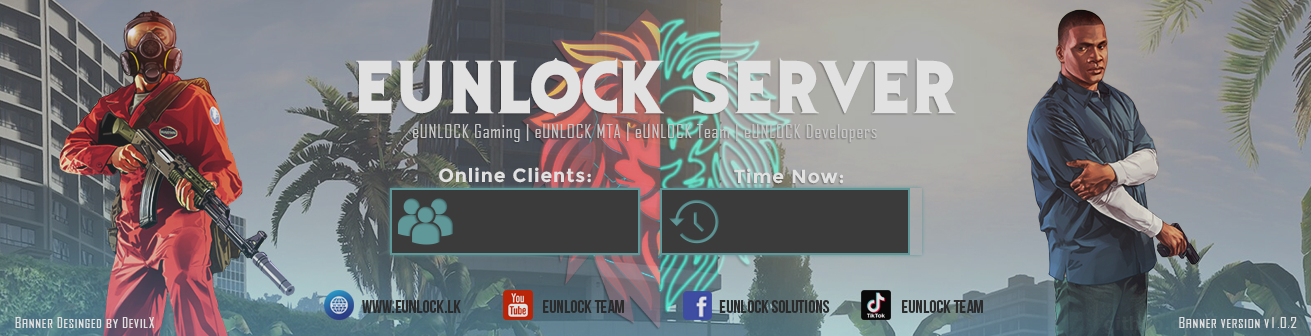
<style>
.page{position:relative;width:1311px;height:336px}
.page>*{position:absolute;margin:0}
.t1{font:62px "EvilDead";letter-spacing:0.05em;color:#e1e1e1}
.t2{font:18px "AgencyFB-Reg";letter-spacing:0.05em;color:#c7c7c7}
.t3{font:19px "Montserrat-Bold";letter-spacing:0.05em;color:#e1e1e1}
.t4{font:18px "BebasNeue";color:#29292a;text-transform:uppercase}
.t5{font:15.4px "Agency";letter-spacing:0.05em;color:#e1e1e1}
</style>
<div class="page">
<p class="t1" style="left:356px;top:57px;width:600px;height:59px">eUNLOCK Server</p>
<p class="t2" style="left:413px;top:124px;width:464px;height:18px">eUNLOCK Gaming | eUNLOCK MTA | eUNLOCK Team | eUNLOCK Developers</p>
<p class="t3" style="left:439px;top:167px;width:152px;height:16px">Online Clients:</p>
<p class="t3" style="left:734px;top:168px;width:109px;height:16px">Time Now:</p>
<p class="t4" style="left:362px;top:300px;width:99px;height:13px">www.eunlock.lk</p>
<p class="t4" style="left:543px;top:300px;width:81px;height:13px">eunlock team</p>
<p class="t4" style="left:719px;top:300px;width:111px;height:13px">eunlock solutions</p>
<p class="t4" style="left:902px;top:300px;width:81px;height:13px">eunlock team</p>
<p class="t5" style="left:15px;top:317px;width:140px;height:11px">Banner Desinged by DevilX</p>
<p class="t5" style="left:1179px;top:317px;width:118px;height:11px">Banner version v1.0.2</p>
</div>
